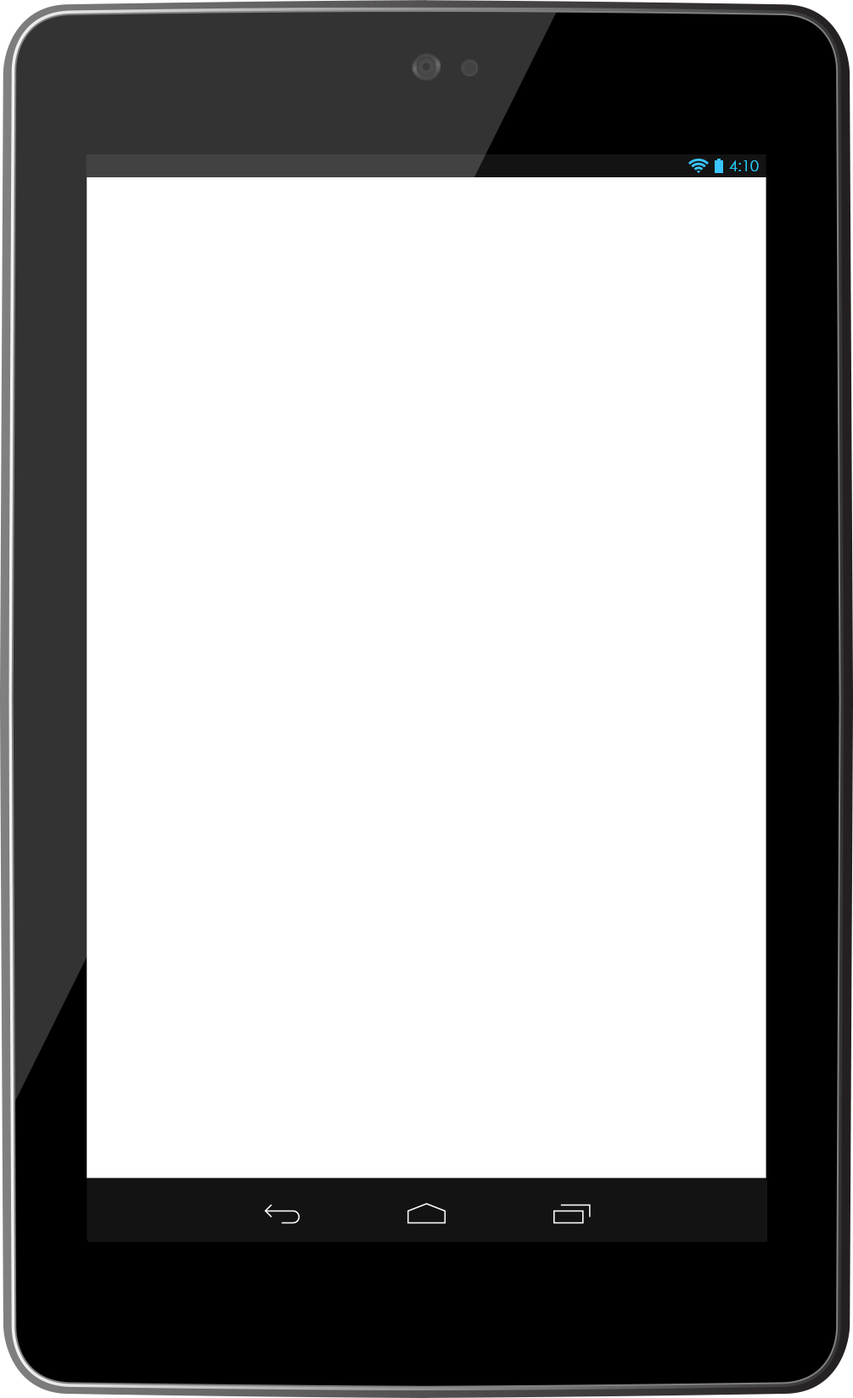
<style>
.page{position:relative;width:853px;height:1398px;background:#ffffff}
.page>*{position:absolute;margin:0}
.t1{font:15.3px "CenturyGothic";color:#27c6f0}
</style>
<div class="page">
<p class="t1" style="left:729px;top:160px;width:30px;height:11px">4:10</p>
</div>
